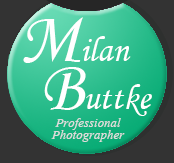
<style>
.page{position:relative;width:174px;height:163px;background:#333333}
.page>*{position:absolute;margin:0}
.t1{font:36px/48px "MonotypeCorsiva";color:#ffffff}
.t2{font:72px/48px "MonotypeCorsiva";color:#ffffff}
.t3{font:16px/12px "Vijaya";color:#dddddd}
</style>
<div class="page">
<p class="t1" style="left:23px;top:17px;width:129px;height:99px;text-align:center"><span class="t2">M</span>ilan <br><span class="t2">  B</span>uttke</p>
<p class="t3" style="left:51px;top:118px;width:74px;height:24px;text-align:center">Professional<br>Photographer</p>
</div>
